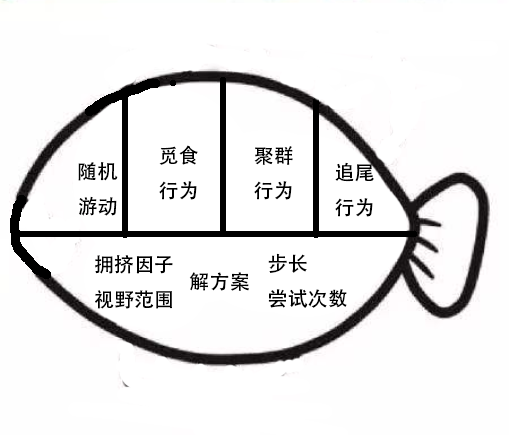
<style>
.page{position:relative;width:509px;height:435px;background:#ffffff}
.page>*{position:absolute;margin:0}
.t1{font:12px "AdobeHeitiStd-Regular";color:#000000}
</style>
<div class="page">
<p class="t1" style="left:159px;top:145px;width:39px;height:55px">觅食<br>行为</p>
<p class="t1" style="left:254px;top:146px;width:39px;height:54px">聚群<br>行为</p>
<p class="t1" style="left:78px;top:162px;width:40px;height:54px">随机<br>游动</p>
<p class="t1" style="left:335px;top:162px;width:39px;height:55px">追尾<br>行为</p>
<p class="t1" style="left:95px;top:255px;width:78px;height:54px">拥挤因子<br>视野范围</p>
<p class="t1" style="left:268px;top:253px;width:79px;height:55px">步长<br>尝试次数</p>
<p class="t1" style="left:189px;top:272px;width:60px;height:19px">解方案</p>
</div>
